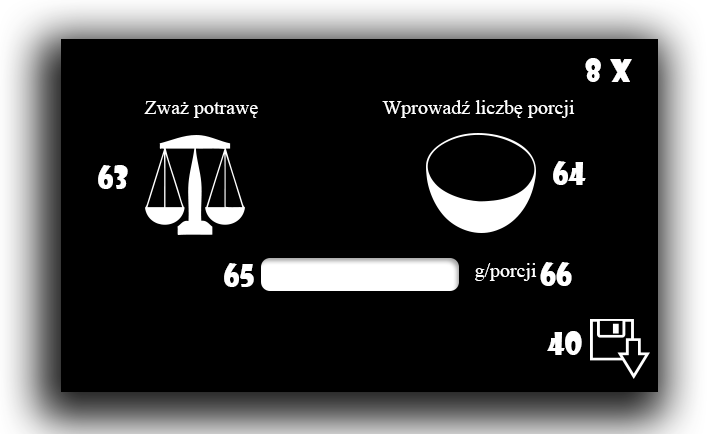
<style>
.page{position:relative;width:716px;height:434px;background:#000000}
.page>*{position:absolute;margin:0}
.t1{font:30px "ShowcardGothic-Reg";color:#ffffff}
.t2{font:30px "ShowcardGothic-Reg";color:#fffefe}
.t3{font:20px "TimesNewRomanPSMT";color:#ffffff}
</style>
<div class="page">
<p class="t1" style="left:585px;top:58px;width:16px;height:24px">8</p>
<p class="t2" style="left:610px;top:59px;width:22px;height:23px">x</p>
<p class="t3" style="left:144px;top:101px;width:114px;height:17px">Zważ potrawę</p>
<p class="t3" style="left:382px;top:100px;width:193px;height:18px">Wprowadź liczbę porcji</p>
<p class="t1" style="left:553px;top:161px;width:33px;height:24px">64</p>
<p class="t1" style="left:98px;top:165px;width:30px;height:24px">63</p>
<p class="t1" style="left:224px;top:263px;width:30px;height:24px">65</p>
<p class="t3" style="left:475px;top:263px;width:62px;height:18px">g/porcji</p>
<p class="t1" style="left:540px;top:262px;width:32px;height:24px">66</p>
<p class="t1" style="left:547px;top:331px;width:35px;height:24px">40</p>
</div>
